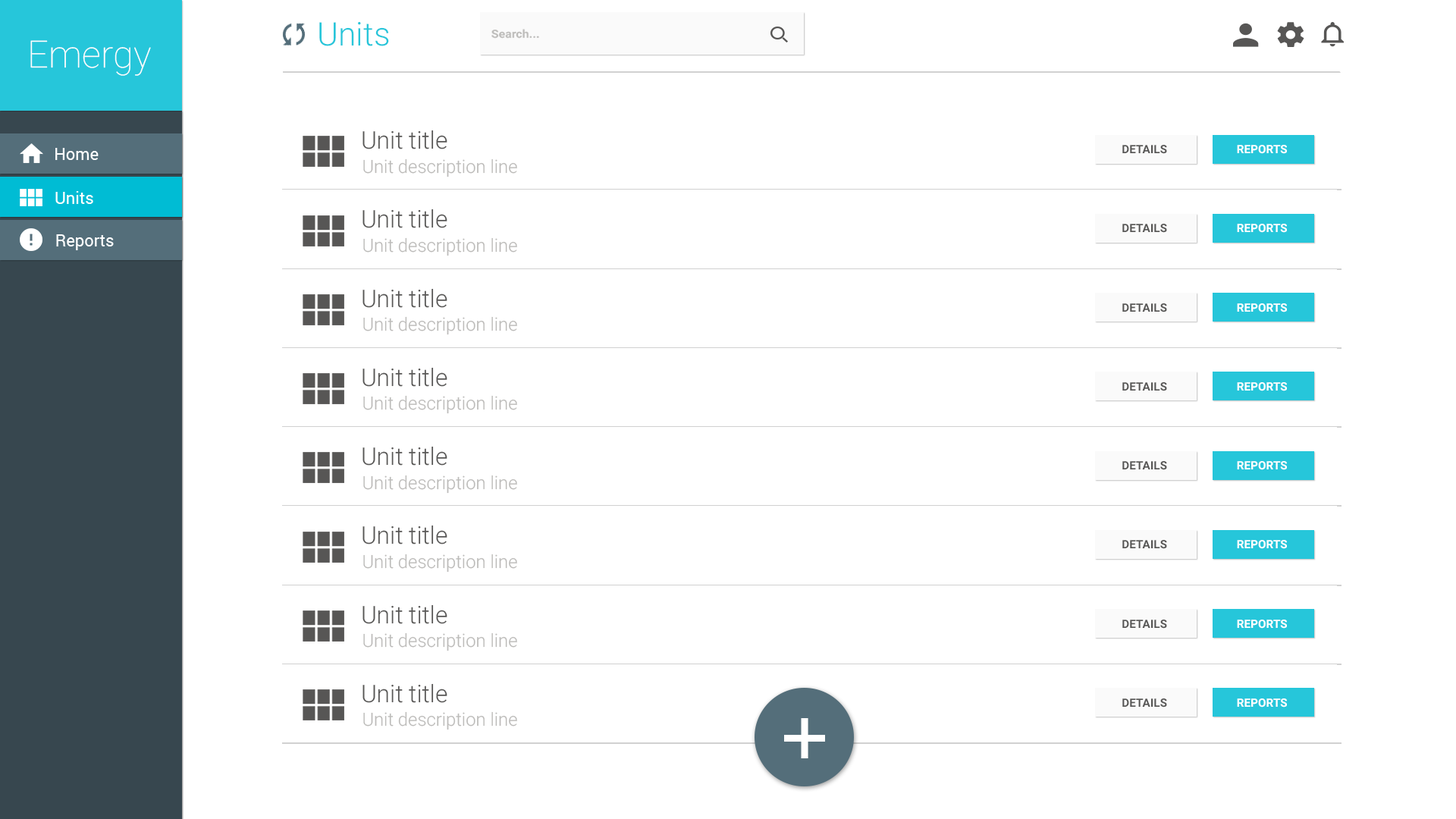
<style>
.page{position:relative;width:1456px;height:819px;background:#ffffff}
.page>*{position:absolute;margin:0}
.t1{font:32.6px "Roboto-Light";color:#26c6da}
.t2{font:11.2px "Roboto-Bold";color:#bcbbb9;scale:1.08 1}
.t3{font:37.6px "Roboto-Thin";color:#ffffff}
.t4{font:24.2px "Roboto-Light";color:#575655}
.t5{font:16.7px "Roboto-Regular";color:#ffffff}
.t6{font:11.6px "Roboto-Bold";color:#575655}
.t7{font:11.6px "Roboto-Bold";color:#ffffff}
.t8{font:18.1px "Roboto-Light";color:#bcbbb9}
</style>
<div class="page">
<p class="t1" style="left:319px;top:22px;width:70px;height:24px">Units</p>
<p class="t2" style="left:491px;top:29px;width:48px;height:10px">Search...</p>
<p class="t3" style="left:30px;top:40px;width:121px;height:36px">Emergy</p>
<p class="t4" style="left:362px;top:130px;width:85px;height:19px">Unit title</p>
<p class="t5" style="left:55px;top:148px;width:44px;height:12px">Home</p>
<p class="t6" style="left:1122px;top:145px;width:45px;height:9px">DETAILS</p>
<p class="t7" style="left:1237px;top:145px;width:50px;height:9px">REPORTS</p>
<p class="t8" style="left:363px;top:158px;width:154px;height:19px">Unit description line</p>
<p class="t5" style="left:55px;top:191px;width:38px;height:13px">Units</p>
<p class="t4" style="left:362px;top:209px;width:85px;height:19px">Unit title</p>
<p class="t6" style="left:1122px;top:224px;width:45px;height:9px">DETAILS</p>
<p class="t7" style="left:1237px;top:224px;width:50px;height:9px">REPORTS</p>
<p class="t5" style="left:56px;top:234px;width:58px;height:16px">Reports</p>
<p class="t8" style="left:363px;top:237px;width:154px;height:19px">Unit description line</p>
<p class="t4" style="left:362px;top:288px;width:85px;height:20px">Unit title</p>
<p class="t6" style="left:1122px;top:303px;width:45px;height:9px">DETAILS</p>
<p class="t7" style="left:1237px;top:303px;width:50px;height:9px">REPORTS</p>
<p class="t8" style="left:363px;top:316px;width:154px;height:19px">Unit description line</p>
<p class="t4" style="left:362px;top:367px;width:85px;height:20px">Unit title</p>
<p class="t6" style="left:1122px;top:382px;width:45px;height:9px">DETAILS</p>
<p class="t7" style="left:1237px;top:382px;width:50px;height:9px">REPORTS</p>
<p class="t8" style="left:363px;top:395px;width:154px;height:19px">Unit description line</p>
<p class="t4" style="left:362px;top:446px;width:85px;height:20px">Unit title</p>
<p class="t6" style="left:1122px;top:461px;width:45px;height:9px">DETAILS</p>
<p class="t7" style="left:1237px;top:461px;width:50px;height:9px">REPORTS</p>
<p class="t8" style="left:363px;top:475px;width:154px;height:19px">Unit description line</p>
<p class="t4" style="left:362px;top:525px;width:85px;height:19px">Unit title</p>
<p class="t6" style="left:1122px;top:540px;width:45px;height:9px">DETAILS</p>
<p class="t7" style="left:1237px;top:540px;width:50px;height:9px">REPORTS</p>
<p class="t8" style="left:363px;top:554px;width:154px;height:19px">Unit description line</p>
<p class="t4" style="left:362px;top:604px;width:85px;height:20px">Unit title</p>
<p class="t6" style="left:1122px;top:620px;width:45px;height:9px">DETAILS</p>
<p class="t7" style="left:1237px;top:620px;width:50px;height:9px">REPORTS</p>
<p class="t8" style="left:363px;top:632px;width:154px;height:19px">Unit description line</p>
<p class="t4" style="left:362px;top:683px;width:85px;height:20px">Unit title</p>
<p class="t6" style="left:1122px;top:698px;width:45px;height:10px">DETAILS</p>
<p class="t7" style="left:1237px;top:698px;width:50px;height:10px">REPORTS</p>
<p class="t8" style="left:363px;top:711px;width:154px;height:19px">Unit description line</p>
</div>
